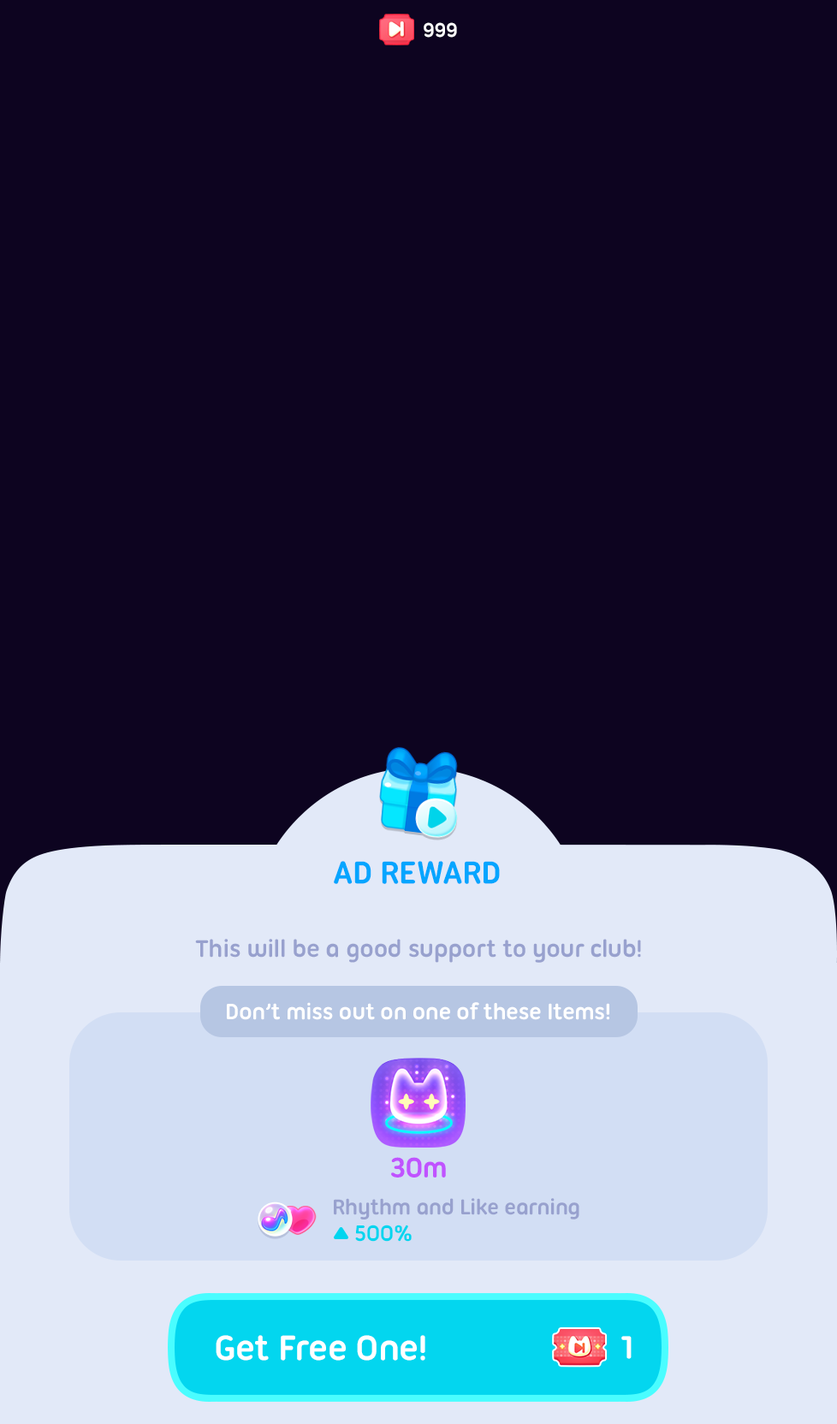
<style>
.page{position:relative;width:837px;height:1424px;background:#0d0420}
.page>*{position:absolute;margin:0}
.t1{font:21.4px "UbuntuTitling-Bold";letter-spacing:-0.025em;color:#ffffff}
.t2{font:34.2px "UbuntuTitling-Bold";letter-spacing:-0.025em;color:#05a5ff;text-transform:uppercase}
.t3{font:25.7px "UbuntuTitling-Bold";letter-spacing:-0.025em;color:#98a1ce}
.t4{font:24px "UbuntuTitling-Bold";letter-spacing:-0.025em;color:#ffffff}
.t5{font:30px "UbuntuTitling-Bold";letter-spacing:-0.025em;color:#c053ff}
.t6{font:23.1px "UbuntuTitling-Bold";letter-spacing:-0.025em;color:#98a1ce}
.t7{font:24px "UbuntuTitling-Bold";letter-spacing:-0.025em;color:#00d5ef}
.t8{font:37.7px "UbuntuTitling-Bold";letter-spacing:-0.025em;color:#ffffff}
.t9{font:34.2px "UbuntuTitling-Bold";letter-spacing:-0.025em;color:#ffffff;text-transform:uppercase}
</style>
<div class="page">
<p class="t1" style="left:424px;top:22px;width:33px;height:16px">999</p>
<p class="t2" style="left:334px;top:861px;width:166px;height:23px">AD Reward</p>
<p class="t3" style="left:195px;top:939px;width:446px;height:24px">This will be a good support to your club!</p>
<p class="t4" style="left:227px;top:1002px;width:382px;height:18px">Don’t miss out on one of these Items!</p>
<p class="t5" style="left:391px;top:1157px;width:55px;height:21px">30m</p>
<p class="t6" style="left:334px;top:1198px;width:246px;height:22px">Rhythm and Like earning</p>
<p class="t7" style="left:355px;top:1225px;width:57px;height:17px">500%</p>
<p class="t8" style="left:216px;top:1335px;width:209px;height:26px">Get Free One!</p>
<p class="t9" style="left:621px;top:1336px;width:11px;height:23px">1</p>
</div>
